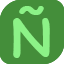
<style>
.page{position:relative;width:64px;height:64px;background:#448e3a}
.page>*{position:absolute;margin:0}
.t1{font:50px "ComicSansMS-Bold";color:#8cf287}
</style>
<div class="page">
<p class="t1" style="left:13px;top:6px;width:37px;height:52px">Ñ</p>
</div>
